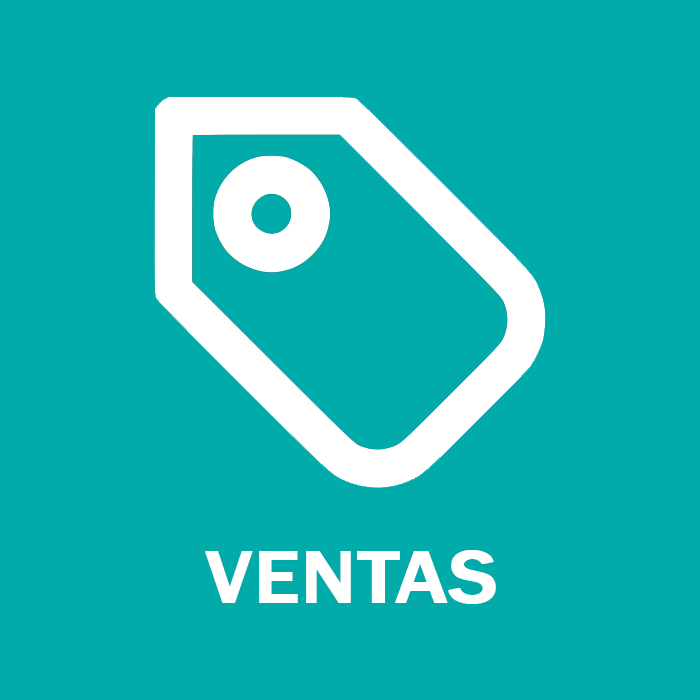
<style>
.page{position:relative;width:700px;height:700px;background:#00aba9}
.page>*{position:absolute;margin:0}
.t1{font:77px "FranklinGothic-Medium";color:#ffffff;font-weight:bold;scale:1.09 1}
</style>
<div class="page">
<p class="t1" style="left:205px;top:550px;width:291px;height:54px">VENTAS</p>
</div>
